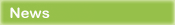
<style>
.page{position:relative;width:175px;height:25px;background:#96c04a}
.page>*{position:absolute;margin:0}
.t1{font:14.2px "ArialRoundedMTBold";color:#fdfcfc;scale:1.07 1}
</style>
<div class="page">
<p class="t1" style="left:10px;top:7px;width:40px;height:11px">News</p>
</div>
